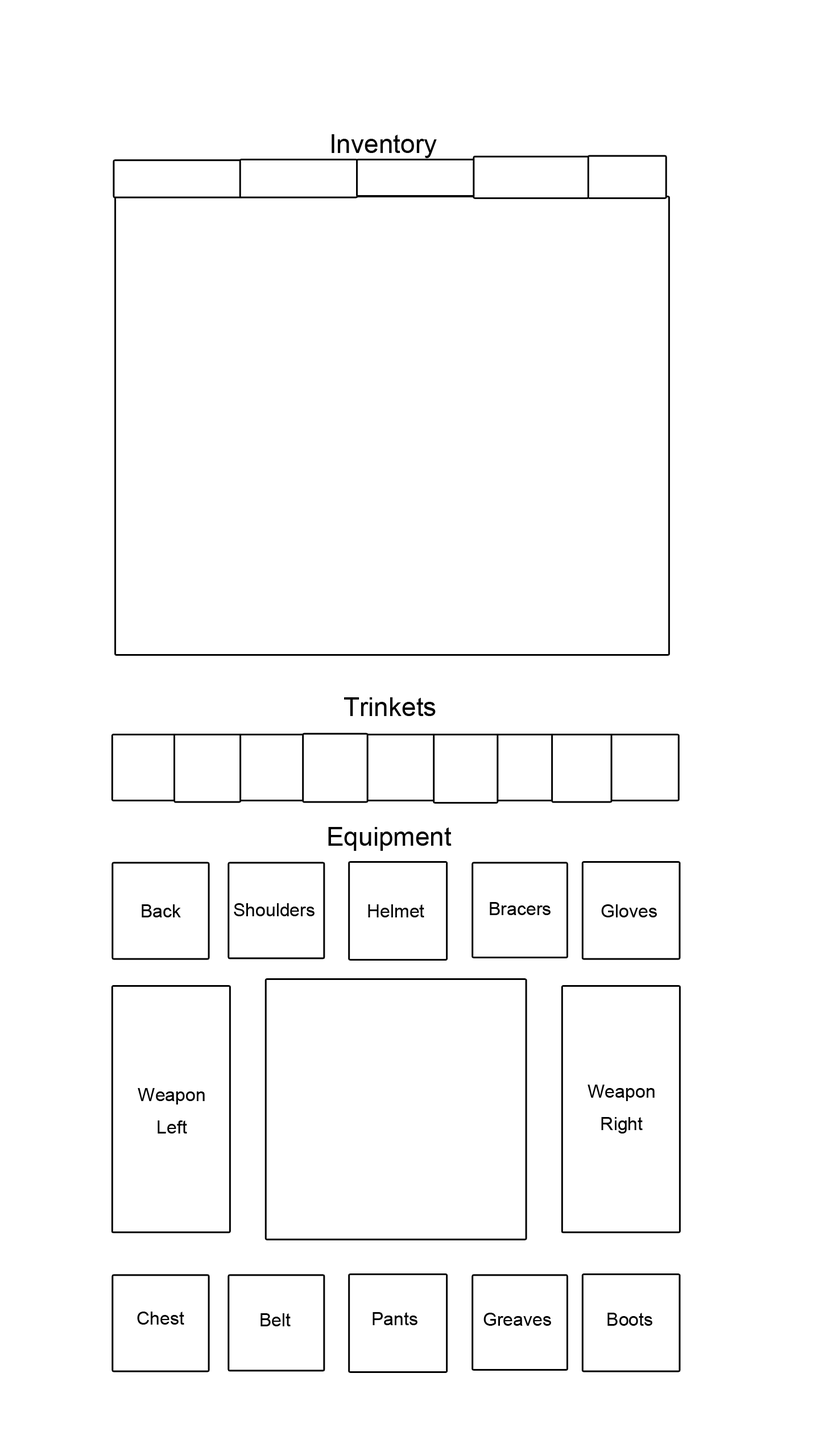
<style>
.page{position:relative;width:819px;height:1456px;background:#ffffff}
.page>*{position:absolute;margin:0}
.t1{font:26.2px "ArialMT";color:#000000}
.t2{font:18.2px "ArialMT";color:#000000}
.t3{font:18.2px/32.4px "ArialMT";color:#000000}
</style>
<div class="page">
<p class="t1" style="left:332px;top:134px;width:105px;height:24px">Inventory</p>
<p class="t1" style="left:344px;top:697px;width:92px;height:19px">Trinkets</p>
<p class="t1" style="left:328px;top:827px;width:124px;height:24px">Equipment</p>
<p class="t2" style="left:142px;top:904px;width:39px;height:13px">Back</p>
<p class="t2" style="left:234px;top:903px;width:81px;height:13px">Shoulders</p>
<p class="t2" style="left:368px;top:904px;width:56px;height:13px">Helmet</p>
<p class="t2" style="left:490px;top:902px;width:61px;height:13px">Bracers</p>
<p class="t2" style="left:601px;top:904px;width:56px;height:13px">Gloves</p>
<p class="t3" style="left:588px;top:1085px;width:67px;height:49px;text-align:center">Weapon<br>Right</p>
<p class="t3" style="left:138px;top:1088px;width:67px;height:46px;text-align:center">Weapon<br>Left</p>
<p class="t2" style="left:137px;top:1312px;width:47px;height:13px">Chest</p>
<p class="t2" style="left:260px;top:1313px;width:31px;height:13px">Belt</p>
<p class="t2" style="left:373px;top:1312px;width:44px;height:13px">Pants</p>
<p class="t2" style="left:483px;top:1313px;width:68px;height:13px">Greaves</p>
<p class="t2" style="left:607px;top:1313px;width:45px;height:13px">Boots</p>
</div>
